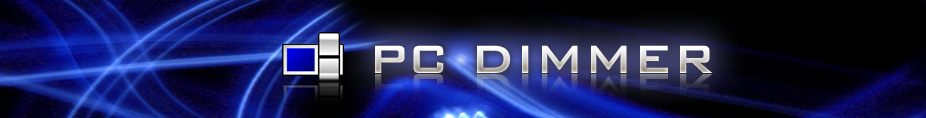
<style>
.page{position:relative;width:926px;height:118px}
.page>*{position:absolute;margin:0}
.t1{font:52.8px "BankGothicBT-Medium"}
</style>
<div class="page">
<p class="t1" style="left:375px;top:45px;width:338px;height:28px">PC DIMMER</p>
</div>
